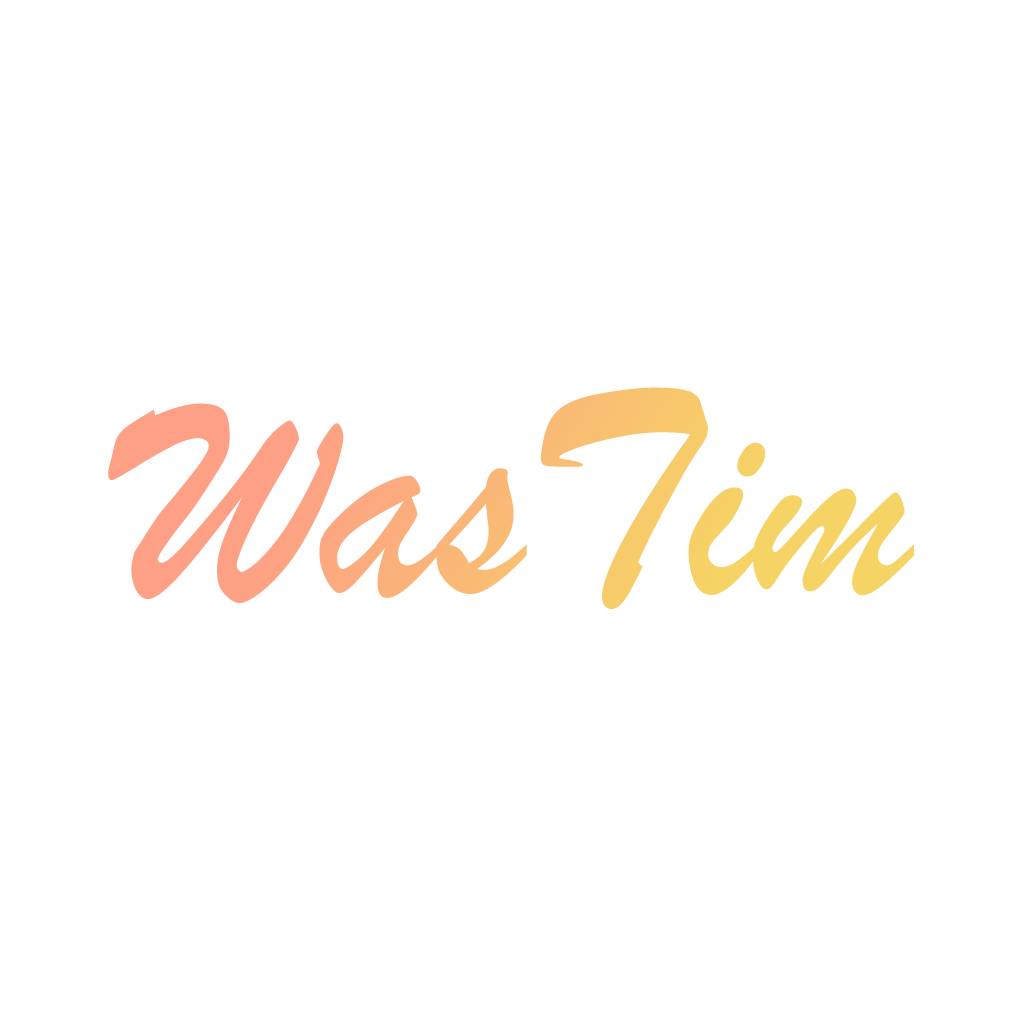
<style>
.page{position:relative;width:1023px;height:1023px;background:#ffffff}
.page>*{position:absolute;margin:0}
.t1{font:314px "BrushScriptMT";scale:0.91 1}
</style>
<div class="page">
<p class="t1" style="left:108px;top:387px;width:806px;height:222px">WasTim</p>
</div>
